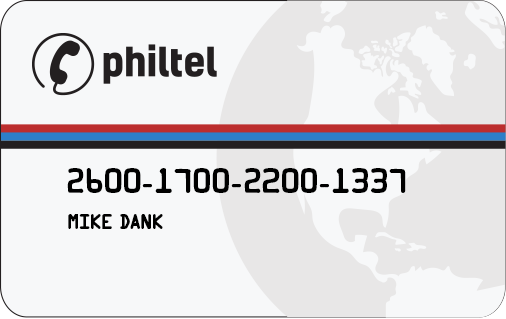
<style>
.page{position:relative;width:506px;height:319px;background:#f7f8f9}
.page>*{position:absolute;margin:0}
.t1{font:22.9px "CreditCard";color:#000000}
.t2{font:20.8px "KreditBack-Regular";color:#000000}
</style>
<div class="page">
<p class="t1" style="left:67px;top:168px;width:339px;height:25px">2600-1700-2200-1337</p>
<p class="t2" style="left:68px;top:214px;width:95px;height:15px">Mike Dank</p>
</div>
